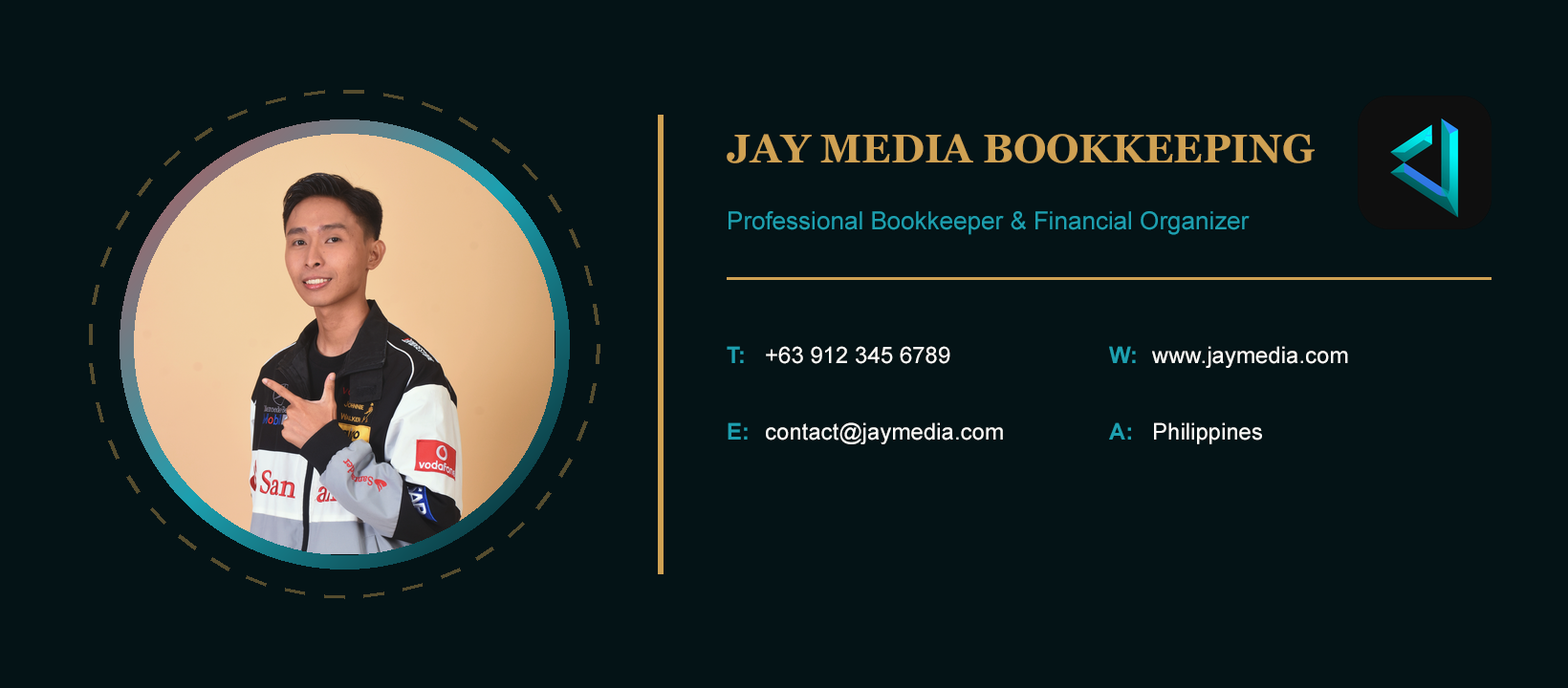
<style>
.page{position:relative;width:1568px;height:688px;background:#041316}
.page>*{position:absolute;margin:0}
.t1{font:40.2px "Georgia-Bold";color:#cfa153}
.t2{font:24.9px "ArialMT";color:#1da0b0}
.t3{font:22.9px "Arial-BoldMT";color:#1da0b0}
.t4{font:22.9px "ArialMT";color:#fbfaf7}
</style>
<div class="page">
<p class="t1" style="left:727px;top:134px;width:588px;height:29px">JAY MEDIA BOOKKEEPING</p>
<p class="t2" style="left:729px;top:211px;width:521px;height:24px">Professional Bookkeeper &amp; Financial Organizer</p>
<p class="t3" style="left:727px;top:346px;width:17px;height:17px">T:</p>
<p class="t4" style="left:766px;top:346px;width:184px;height:18px">+63 912 345 6789</p>
<p class="t3" style="left:1109px;top:346px;width:27px;height:17px">W:</p>
<p class="t4" style="left:1152px;top:346px;width:196px;height:22px">www.jaymedia.com</p>
<p class="t3" style="left:728px;top:423px;width:20px;height:17px">E:</p>
<p class="t4" style="left:766px;top:423px;width:237px;height:22px">contact@jaymedia.com</p>
<p class="t3" style="left:1109px;top:423px;width:22px;height:17px">A:</p>
<p class="t4" style="left:1154px;top:423px;width:108px;height:22px">Philippines</p>
</div>
